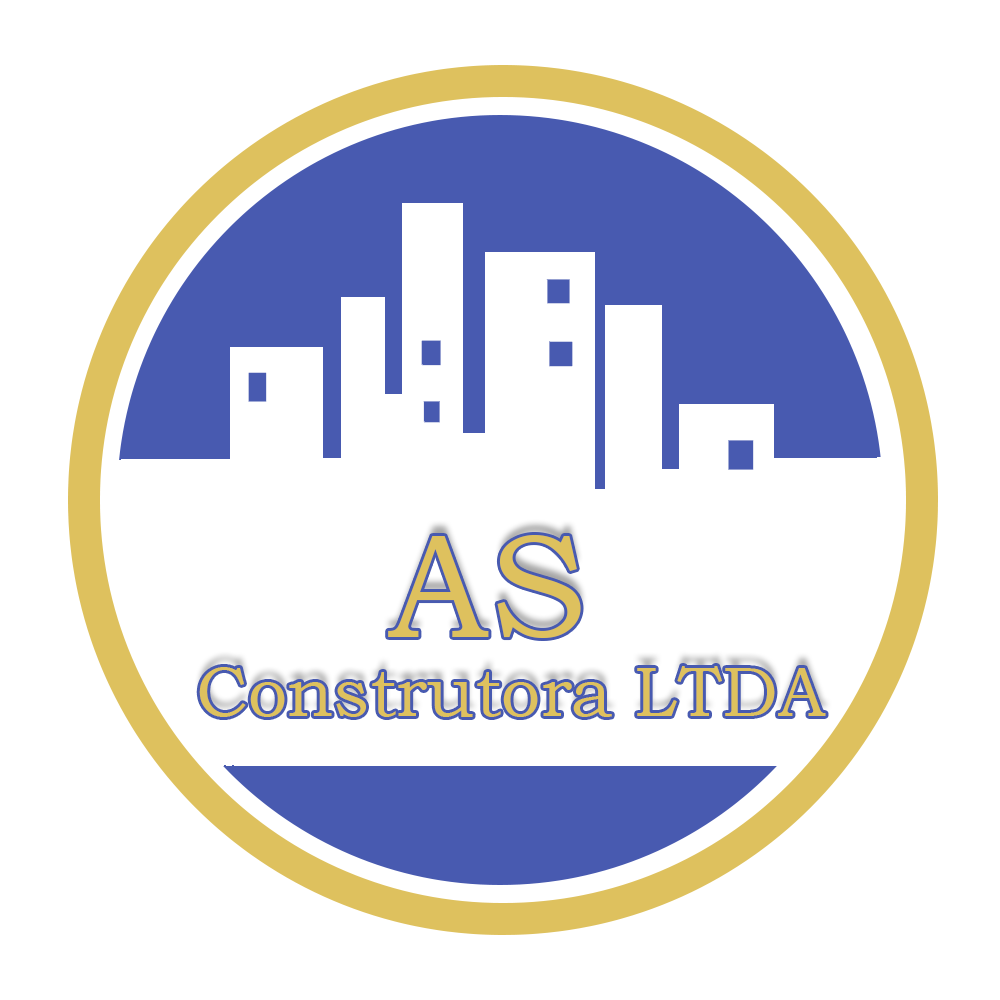
<style>
.page{position:relative;width:1000px;height:1000px;background:#ffffff}
.page>*{position:absolute;margin:0}
.t1{font:70px/79px "BookmanOldStyle";color:#dec15e}
.t2{font:148px/79px "BookmanOldStyle";color:#dec15e}
</style>
<div class="page">
<p class="t1" style="left:199px;top:535px;width:627px;height:182px;text-align:center"><span class="t2">AS <br></span>Construtora LTDA</p>
</div>
